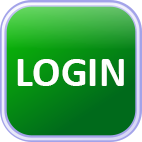
<style>
.page{position:relative;width:142px;height:142px}
.page>*{position:absolute;margin:0}
.t1{font:42px "Calibri-Bold";color:#fefffd}
</style>
<div class="page">
<p class="t1" style="left:17px;top:59px;width:107px;height:27px">LOGIN</p>
</div>
